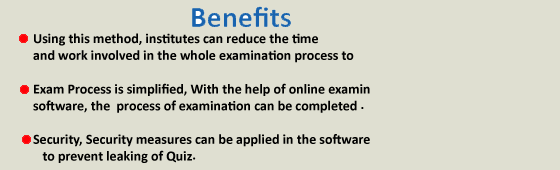
<style>
.page{position:relative;width:560px;height:170px;background:#dfdfd1}
.page>*{position:absolute;margin:0}
.t1{font:14px "Calibri-Bold";color:#000000}
</style>
<div class="page">
<p class="t1" style="left:33px;top:33px;width:337px;height:130px">Using this method, institutes can reduce the time <br>and work involved in the whole examination process to <br><br>Exam Process is simplified, With the help of online examin<br>software, the  process of examination can be completed .<br><br>Security, Security measures can be applied in the software <br>   to prevent leaking of Quiz.</p>
</div>
